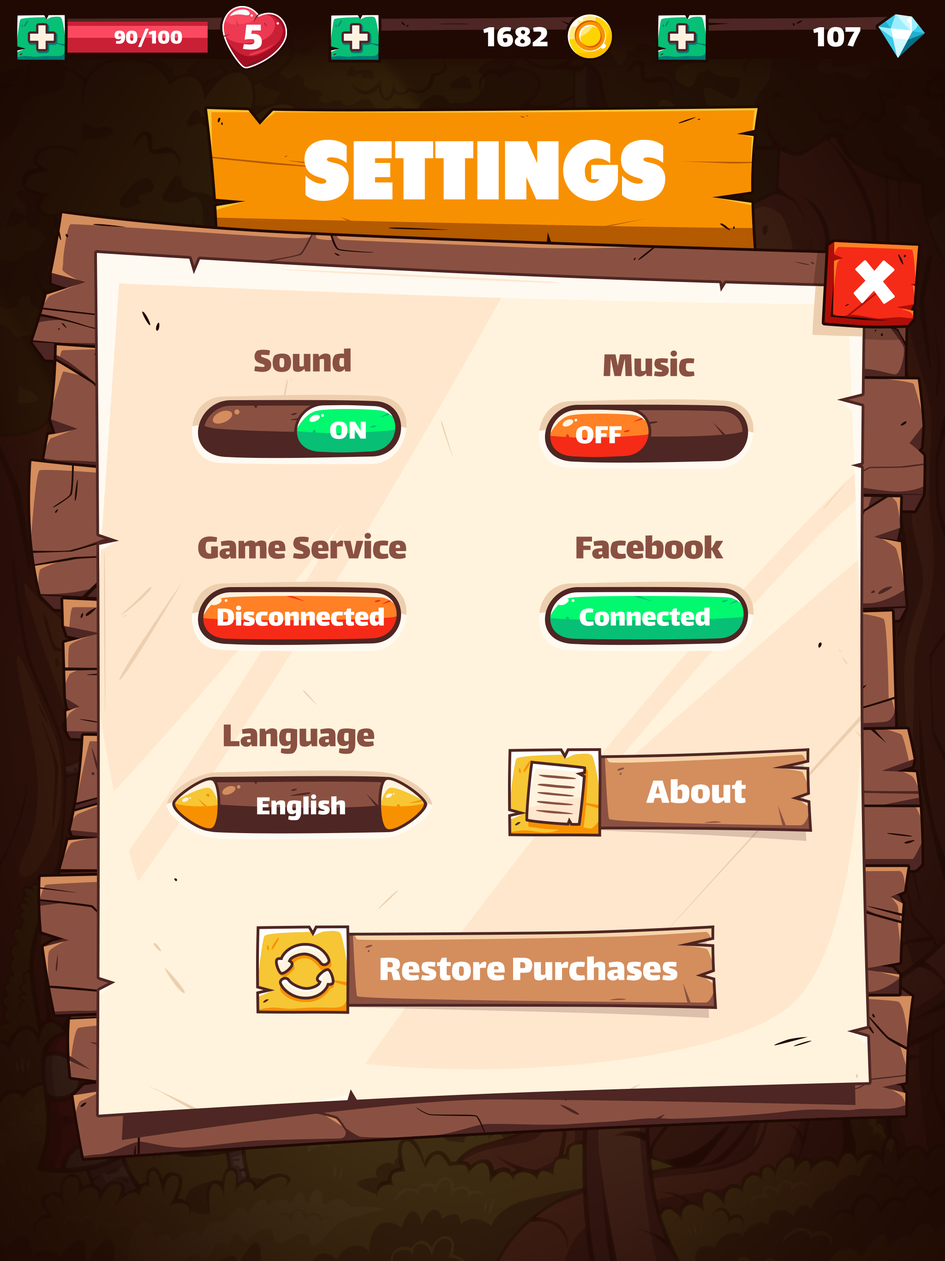
<style>
.page{position:relative;width:945px;height:1261px;background:#fff3dd}
.page>*{position:absolute;margin:0}
.t1{font:57.2px "Lalezar-Regular";color:#fff3dd}
.t2{font:22.2px "Lalezar-Regular";color:#ffffff}
.t3{font:42.5px "Lalezar-Regular";color:#ffffff}
.t4{font:33.2px "Lalezar-Regular";color:#ffffff}
.t5{font:83.1px "Tondu-Beta";color:#ffffff;text-transform:uppercase}
.t6{font:37.9px "Lalezar-Regular";color:#8a5142}
.t7{font:29.5px "Lalezar-Regular";color:#ffffff}
.t8{font:38.8px "Lalezar-Regular";color:#ffffff}
</style>
<div class="page">
<p class="t1" style="left:30px;top:25px;width:24px;height:24px">+</p>
<p class="t2" style="left:114px;top:29px;width:68px;height:18px">90/100</p>
<p class="t3" style="left:243px;top:24px;width:19px;height:26px">5</p>
<p class="t1" style="left:344px;top:25px;width:24px;height:24px">+</p>
<p class="t4" style="left:483px;top:27px;width:65px;height:20px">1682</p>
<p class="t1" style="left:670px;top:25px;width:24px;height:24px">+</p>
<p class="t4" style="left:813px;top:27px;width:48px;height:20px">107</p>
<p class="t5" style="left:304px;top:140px;width:362px;height:61px">settings</p>
<p class="t6" style="left:254px;top:348px;width:97px;height:24px">Sound</p>
<p class="t6" style="left:604px;top:350px;width:91px;height:27px">Music</p>
<p class="t7" style="left:330px;top:421px;width:36px;height:18px">ON</p>
<p class="t7" style="left:576px;top:426px;width:46px;height:18px">OFF</p>
<p class="t6" style="left:198px;top:533px;width:209px;height:26px">Game Service</p>
<p class="t6" style="left:577px;top:535px;width:147px;height:24px">Facebook</p>
<p class="t7" style="left:217px;top:606px;width:167px;height:20px">Disconnected</p>
<p class="t7" style="left:580px;top:608px;width:130px;height:18px">Connected</p>
<p class="t6" style="left:224px;top:724px;width:150px;height:30px">Language</p>
<p class="t8" style="left:646px;top:779px;width:100px;height:25px">About</p>
<p class="t7" style="left:257px;top:794px;width:88px;height:26px">English</p>
<p class="t8" style="left:380px;top:957px;width:298px;height:24px">Restore Purchases</p>
</div>
